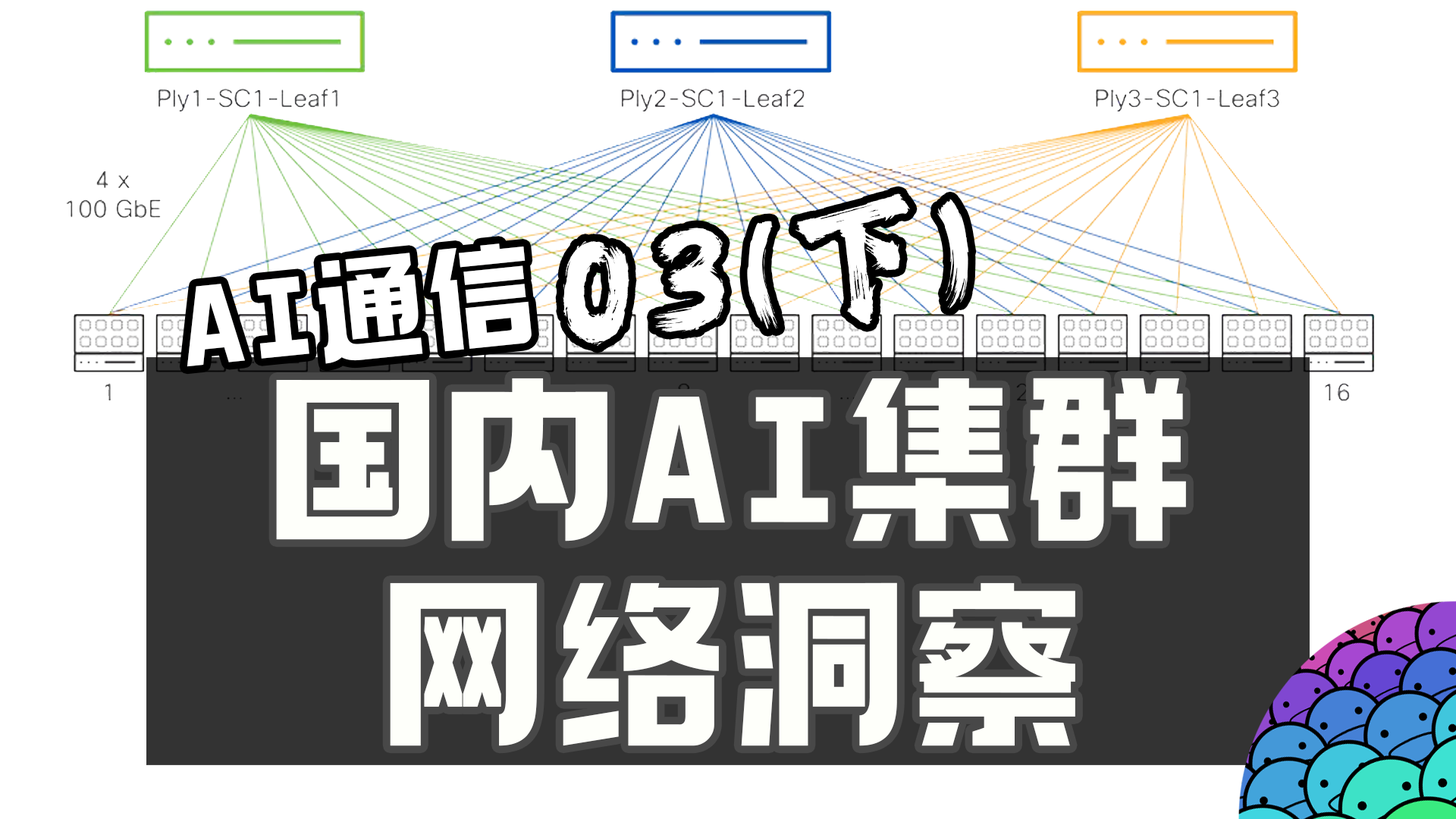
<style>
.page{position:relative;width:1456px;height:819px;background:#ffffff}
.page>*{position:absolute;margin:0}
.t1{font:136.5px "REEJI-CHAO-BeiMingGBT-Flash";letter-spacing:0.05em;color:#ffffff}
.t2{font:113.7px "098-";letter-spacing:0.05em;color:#ffffff}
.t3{font:182px/204.7px "098-";letter-spacing:0.05em;color:#fefffa}
</style>
<div class="page">
<p class="t1" style="left:563px;top:193px;width:406px;height:153px;rotate:-7deg">03(下)</p>
<p class="t2" style="left:187px;top:243px;width:345px;height:124px;rotate:-6deg">AI通信</p>
<p class="t3" style="left:276px;top:378px;width:910px;height:368px;text-align:center">国内AI集群<br>网络洞察</p>
</div>
